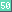
<style>
.page{position:relative;width:12px;height:12px;background:#61dab5}
.page>*{position:absolute;margin:0}
.t1{font:15px "Pixeltype";letter-spacing:0.06em;color:#ffffff;scale:0.88 1}
</style>
<div class="page">
<p class="t1" style="left:1px;top:2px;width:9px;height:7px">50</p>
</div>
